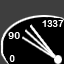
<style>
.page{position:relative;width:64px;height:64px;background:#000000}
.page>*{position:absolute;margin:0}
.t1{font:9px "ArialRoundedMTBold";color:#ffffff}
.t2{font:10px "ArialRoundedMTBold";color:#ffffff}
</style>
<div class="page">
<p class="t1" style="left:42px;top:20px;width:22px;height:7px">1337</p>
<p class="t2" style="left:8px;top:32px;width:12px;height:7px">90</p>
<p class="t1" style="left:9px;top:55px;width:6px;height:7px">0</p>
</div>
